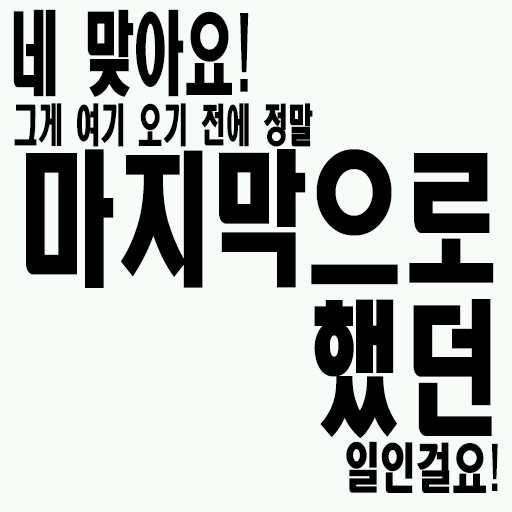
<style>
.page{position:relative;width:512px;height:512px;background:#f8fcf8}
.page>*{position:absolute;margin:0}
.t1{font:90px "HeadlineR-HM";color:#000000;scale:0.56 1}
.t2{font:45px "HeadlineR-HM";color:#000000;scale:0.56 1}
.t3{font:144px/150px "HeadlineR-HM";color:#000000;scale:0.67 1}
.t4{font:54px "HeadlineR-HM";color:#000000;scale:0.67 1}
</style>
<div class="page">
<p class="t1" style="left:13px;top:9px;width:236px;height:88px">네 맞아요!</p>
<p class="t2" style="left:14px;top:103px;width:299px;height:44px">그게 여기 오기 전에 정말</p>
<p class="t3" style="left:26px;top:149px;width:468px;height:289px;text-align:right">마지막으로<br>했던</p>
<p class="t4" style="left:346px;top:441px;width:152px;height:52px">일인걸요!</p>
</div>
